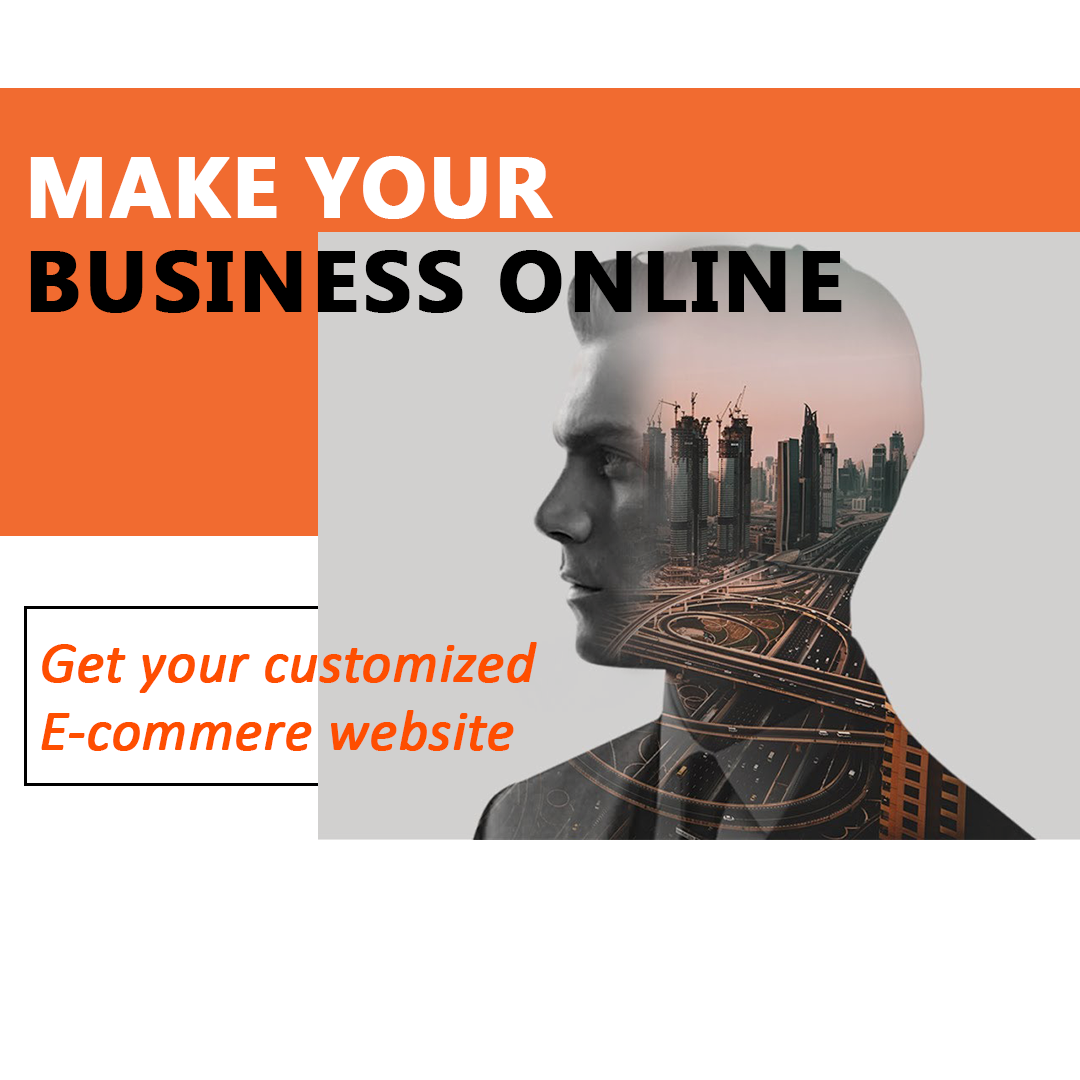
<style>
.page{position:relative;width:1080px;height:1080px;background:#ffffff}
.page>*{position:absolute;margin:0}
.t1{font:86.4px/94.4px "MicrosoftNewTaiLue-Bold";letter-spacing:0.03em;color:#000000;text-transform:uppercase;font-weight:bold}
.t2{font:86.4px/97.3px "MicrosoftNewTaiLue-Bold";color:#ffffff;text-transform:uppercase;font-weight:bold}
.t3{font:56.7px/68.3px "Calibri-Italic";color:#fe4e00;font-weight:bold}
</style>
<div class="page">
<p class="t1" style="left:30px;top:156px;width:812px;height:157px"><span class="t2">Make your<br></span>business online</p>
<p class="t3" style="left:41px;top:642px;width:496px;height:109px">Get your customized<br>E-commere website</p>
</div>
